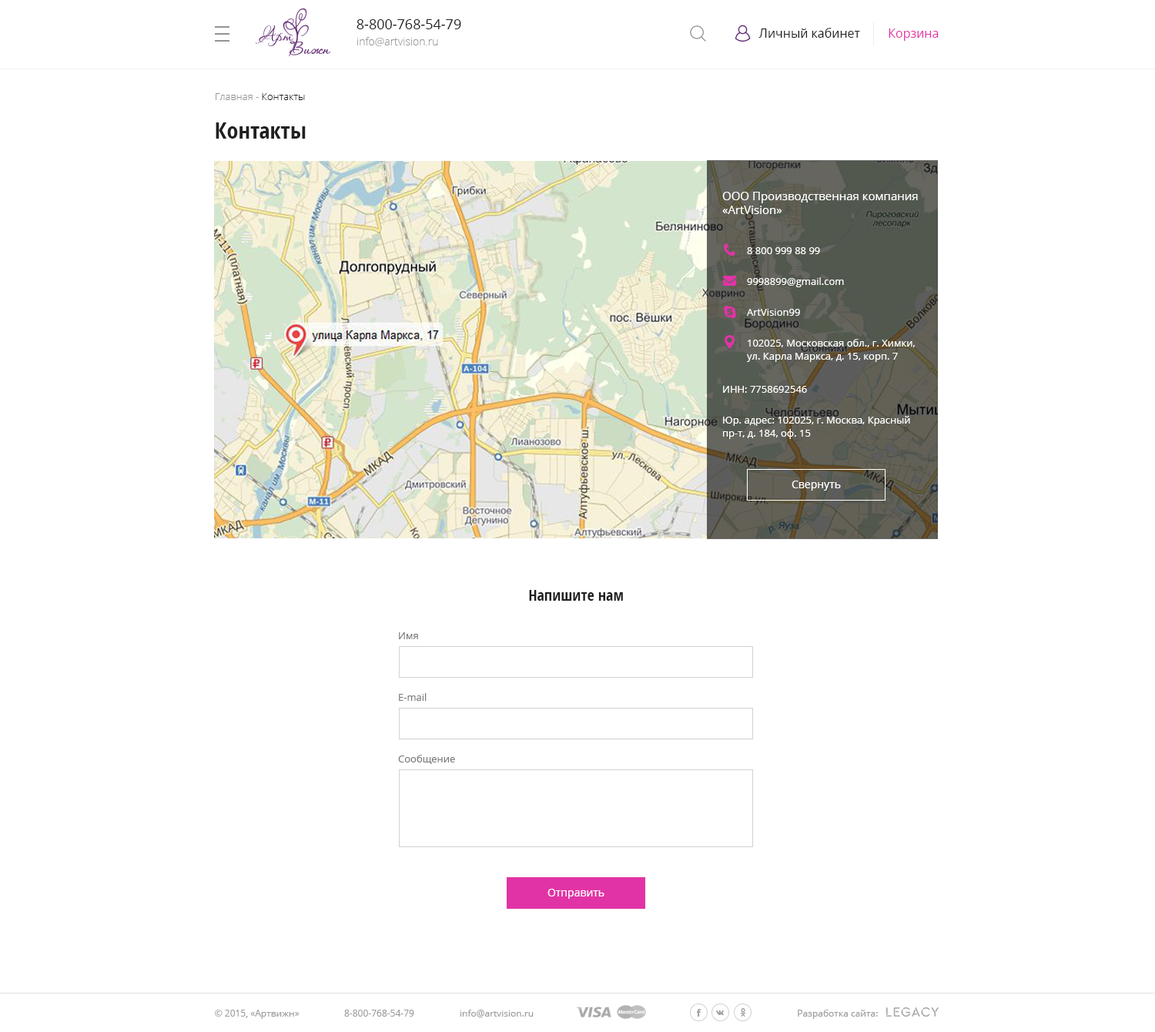
<style>
.page{position:relative;width:1155px;height:1032px;background:#ffffff}
.page>*{position:absolute;margin:0}
.t1{font:13.9px "OpenSans";color:#202020}
.t2{font:12.3px "OpenSans";color:#202020}
.t3{font:12.3px "OpenSans";color:#e233a6}
.t4{font:10.8px "OpenSans-Light";color:#999999}
.t5{font:10px "OpenSans-Light";color:#939393}
.t6{font:10px "OpenSans-Light";color:#202020}
.t7{font:23.1px "OpenSans-CondensedBold";color:#202020}
.t8{font:11.6px/13.9px "OpenSans";color:#ffffff}
.t9{font:10px "OpenSans";color:#ffffff}
.t10{font:10px/13.1px "OpenSans";color:#ffffff}
.t11{font:10.8px "OpenSans";color:#ffffff}
.t12{font:15.4px "OpenSans-CondensedBold";color:#202020}
.t13{font:10px "OpenSans";color:#7a7a7a}
.t14{font:9.2px "OpenSans";color:#9e9d9d}
</style>
<div class="page">
<p class="t1" style="left:357px;top:19px;width:104px;height:10px">8-800-768-54-79</p>
<p class="t2" style="left:759px;top:28px;width:101px;height:10px">Личный кабинет</p>
<p class="t3" style="left:889px;top:28px;width:50px;height:13px">Корзина</p>
<p class="t4" style="left:357px;top:37px;width:81px;height:9px">info@artvision.ru</p>
<p class="t5" style="left:216px;top:93px;width:89px;height:7px">Главная - <span class="t6">Контакты</span></p>
<p class="t7" style="left:216px;top:122px;width:90px;height:17px">Контакты</p>
<p class="t8" style="left:722px;top:192px;width:196px;height:22px">ООО Производственная компания <br>«ArtVision»</p>
<p class="t9" style="left:747px;top:247px;width:73px;height:7px">8 800 999 88 99</p>
<p class="t9" style="left:747px;top:277px;width:97px;height:10px">9998899@gmail.com</p>
<p class="t9" style="left:747px;top:309px;width:53px;height:7px">ArtVision99</p>
<p class="t10" style="left:747px;top:339px;width:168px;height:23px">102025, Московская обл., г. Химки,<br>ул. Карла Маркса, д. 15, корп. 7</p>
<p class="t9" style="left:723px;top:386px;width:84px;height:7px">ИНН: 7758692546</p>
<p class="t10" style="left:723px;top:416px;width:187px;height:23px">Юр. адрес: 102025, г. Москва, Красный пр-т, д. 184, оф. 15</p>
<p class="t11" style="left:792px;top:481px;width:49px;height:10px">Свернуть</p>
<p class="t12" style="left:529px;top:590px;width:94px;height:11px">Напишите нам</p>
<p class="t13" style="left:399px;top:632px;width:19px;height:7px">Имя</p>
<p class="t13" style="left:399px;top:693px;width:28px;height:8px">E-mail</p>
<p class="t13" style="left:398px;top:755px;width:57px;height:9px">Сообщение</p>
<p class="t11" style="left:548px;top:889px;width:57px;height:10px">Отправить</p>
<p class="t14" style="left:215px;top:1010px;width:85px;height:9px">© 2015, «Артвижн»</p>
<p class="t14" style="left:344px;top:1010px;width:70px;height:7px">8-800-768-54-79</p>
<p class="t14" style="left:460px;top:1010px;width:74px;height:7px">info@artvision.ru</p>
<p class="t14" style="left:798px;top:1010px;width:80px;height:9px">Разработка сайта:</p>
</div>
